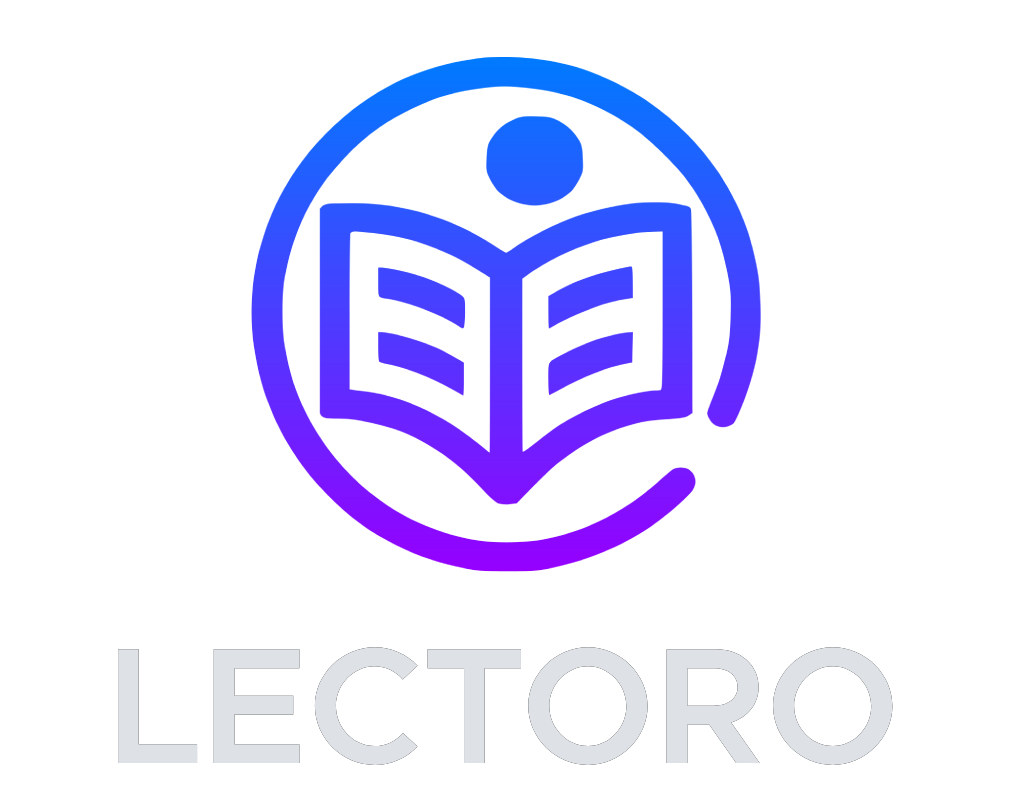
<style>
.page{position:relative;width:1012px;height:788px;background:#ffffff}
.page>*{position:absolute;margin:0}
.t1{font:165.5px "Metropolis-SemiBold";color:#dee2e6}
</style>
<div class="page">
<p class="t1" style="left:118px;top:647px;width:775px;height:118px">LECTORO</p>
</div>
